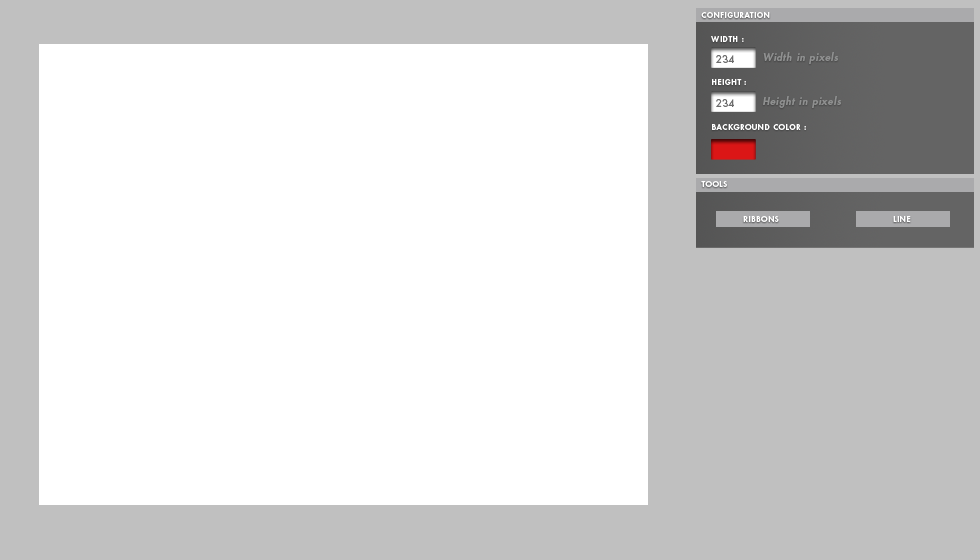
<style>
.page{position:relative;width:980px;height:560px;background:#ffffff}
.page>*{position:absolute;margin:0}
.t1{font:8px "FuturaStd-Heavy";letter-spacing:0.075em;color:#ffffff}
.t2{font:10px "FuturaStd-HeavyOblique";letter-spacing:0.075em;color:#8f9090}
.t3{font:10px "FuturaStd-Medium";letter-spacing:0.075em;color:#6d6d6d}
</style>
<div class="page">
<p class="t1" style="left:701px;top:12px;width:69px;height:6px">CONFIGURATION</p>
<p class="t1" style="left:711px;top:36px;width:33px;height:6px">WIDTH :</p>
<p class="t2" style="left:763px;top:52px;width:76px;height:12px">Width in pixels</p>
<p class="t3" style="left:716px;top:55px;width:18px;height:8px">234</p>
<p class="t1" style="left:712px;top:79px;width:34px;height:6px">HEIGHT :</p>
<p class="t3" style="left:716px;top:99px;width:18px;height:8px">234</p>
<p class="t2" style="left:763px;top:96px;width:79px;height:12px">Height in pixels</p>
<p class="t1" style="left:712px;top:124px;width:94px;height:6px">BACKGROUND COLOR :</p>
<p class="t1" style="left:701px;top:181px;width:26px;height:6px">TOOLS</p>
<p class="t1" style="left:743px;top:216px;width:36px;height:6px">RIBBONS</p>
<p class="t1" style="left:893px;top:216px;width:18px;height:6px">LINE</p>
</div>
